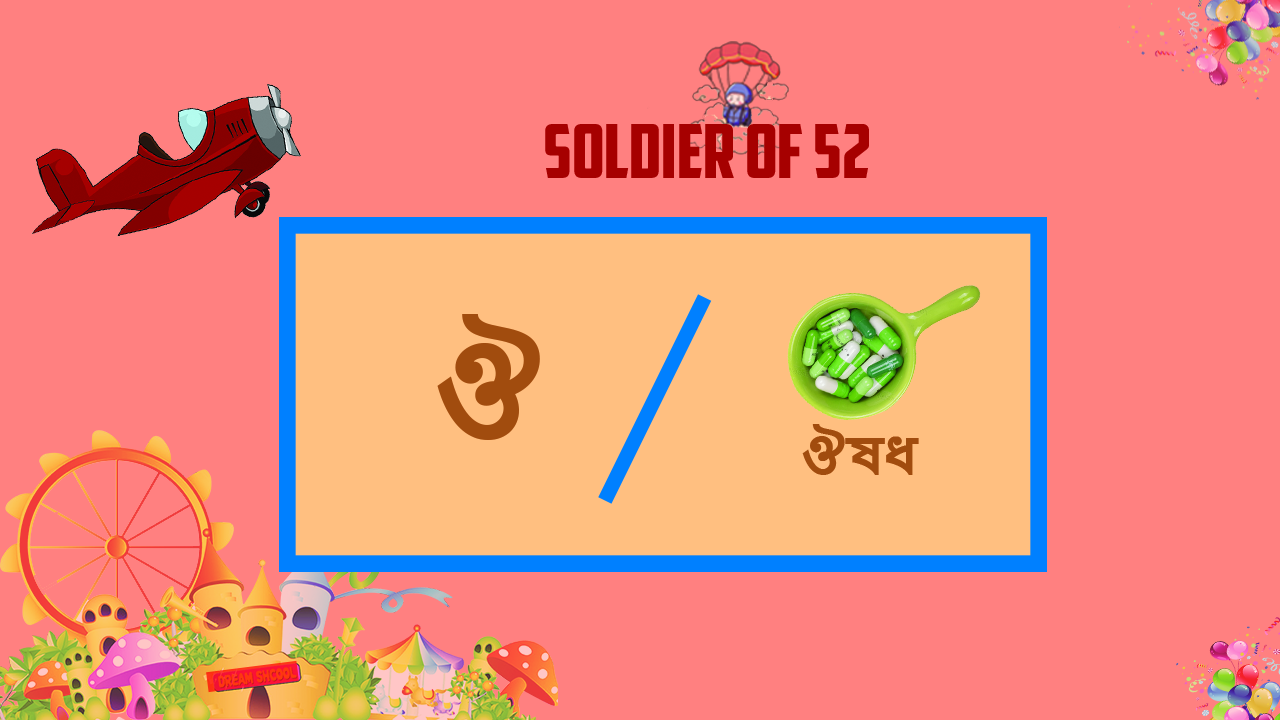
<style>
.page{position:relative;width:1280px;height:720px;background:#ff8080}
.page>*{position:absolute;margin:0}
.t1{font:74.5px "AmericanCaptain";color:#a60000}
.t2{font:122.1px "NirmalaUI-Bold";color:#a24b0d}
.t3{font:49.7px "NirmalaUI-Bold";color:#a24b0d}
</style>
<div class="page">
<p class="t1" style="left:545px;top:124px;width:324px;height:54px">SOLDIER OF 52</p>
<p class="t2" style="left:437px;top:314px;width:103px;height:126px">ঔ</p>
<p class="t3" style="left:802px;top:424px;width:117px;height:51px">ঔষধ</p>
</div>
